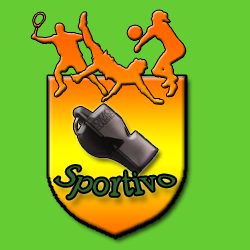
<style>
.page{position:relative;width:250px;height:250px;background:#66cc33}
.page>*{position:absolute;margin:0}
.t1{font:30px "PoorRichard-Regular";color:#336633}
</style>
<div class="page">
<p class="t1" style="left:55px;top:166px;width:121px;height:33px">Sportivo</p>
</div>
